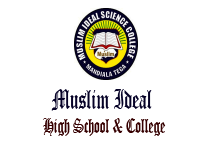
<style>
.page{position:relative;width:200px;height:150px;background:#ffffff}
.page>*{position:absolute;margin:0}
.t1{font:20px "OldEnglishTextMT";color:#360001;scale:0.64 1}
.t2{font:27.2px "OldEnglishTextMT";color:#060227;scale:0.64 1}
</style>
<div class="page">
<p class="t1" style="left:43px;top:89px;width:123px;height:47px;text-align:center"><span class="t2">Muslim Ideal <br></span>High School &amp; College</p>
</div>
